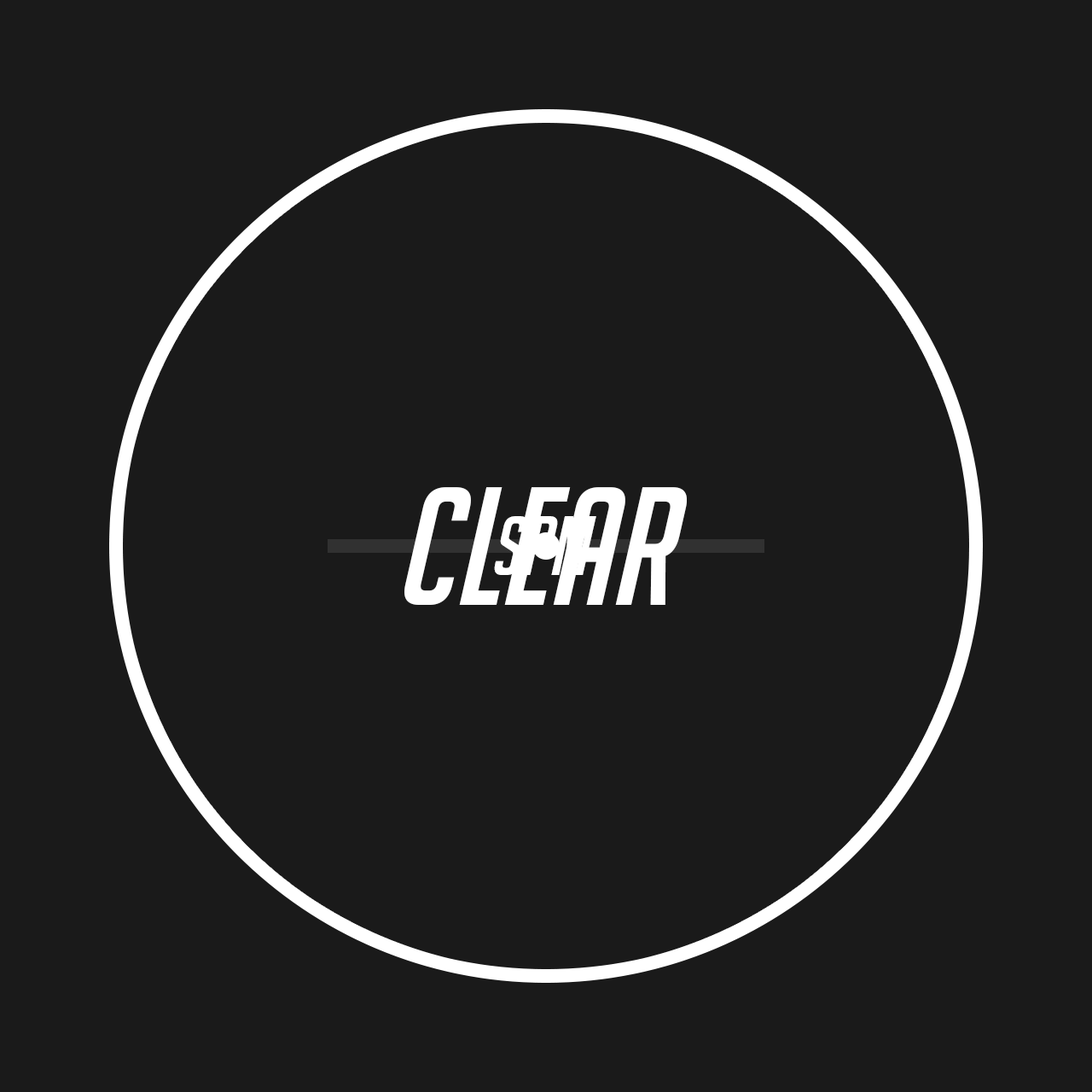
<style>
.page{position:relative;width:1092px;height:1092px;background:#1a1a1a}
.page>*{position:absolute;margin:0}
.t1{font:163.8px "BigNoodleTitling-Oblique";color:#ffffff;font-style:italic}
.t2{font:81.9px "BigNoodleTitling-Oblique";color:#ffffff;font-style:italic}
</style>
<div class="page">
<p class="t1" style="left:404px;top:487px;width:283px;height:118px">CLEAR</p>
<p class="t2" style="left:494px;top:516px;width:102px;height:59px">SPM</p>
</div>
